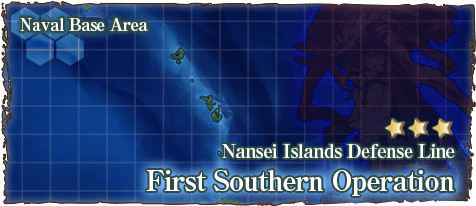
<style>
.page{position:relative;width:476px;height:206px}
.page>*{position:absolute;margin:0}
.t1{font:17px "RyuminPro-ExBold";letter-spacing:-0.04em;color:#ffffff}
.t2{font:19px "RyuminPro-ExBold";letter-spacing:-0.04em;color:#ffffff}
.t3{font:28px "RyuminPro-ExBold";letter-spacing:-0.04em;color:#ffffff}
</style>
<div class="page">
<p class="t1" style="left:20px;top:18px;width:128px;height:14px">Naval Base Area</p>
<p class="t2" style="left:222px;top:144px;width:233px;height:15px">Nansei Islands Defense Line</p>
<p class="t3" style="left:146px;top:170px;width:308px;height:26px">First Southern Operation</p>
</div>
